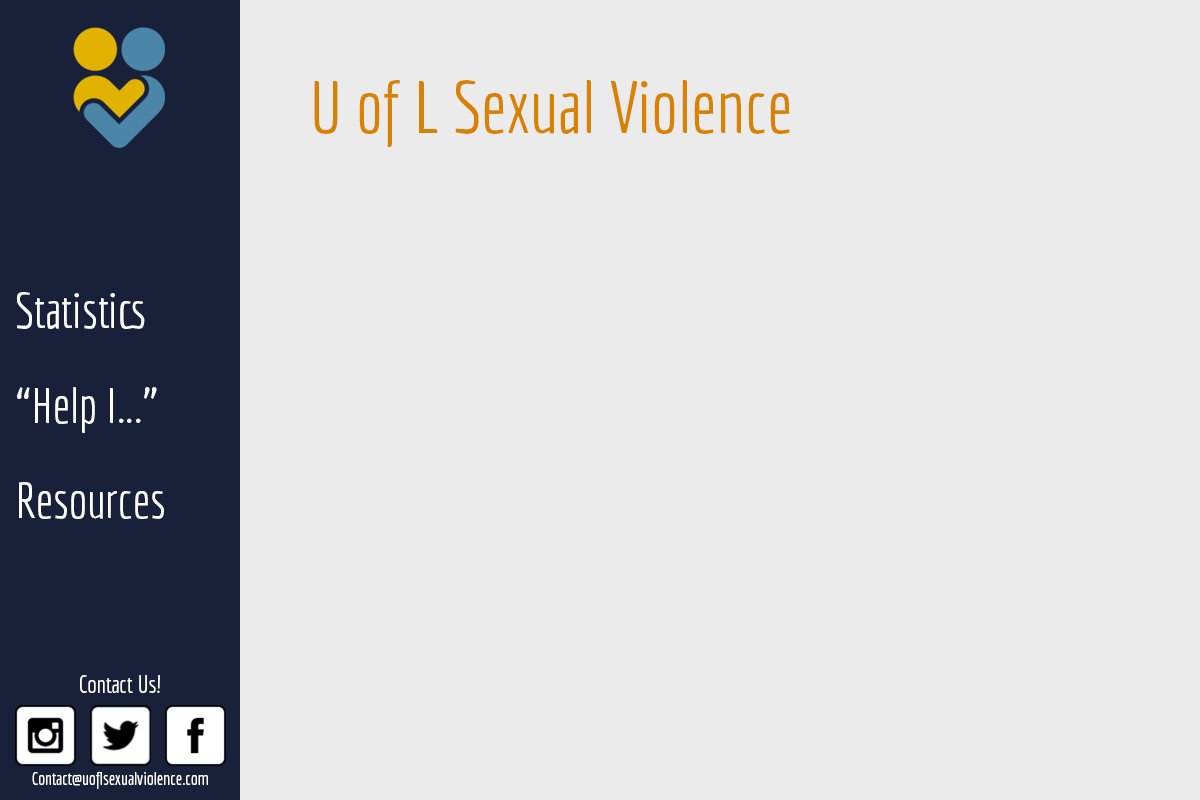
<style>
.page{position:relative;width:1200px;height:800px;background:#ebebeb}
.page>*{position:absolute;margin:0}
.t1{font:72px "Economica-Regular";color:#d98100}
.t2{font:48px/95px "Economica-Regular";color:#ffffff}
.t3{font:60px/95px "Economica-Regular";color:#ffffff}
.t4{font:24px "Economica-Regular";color:#ffffff}
.t5{font:18px "Economica-Regular";color:#ffffff}
</style>
<div class="page">
<p class="t1" style="left:314px;top:80px;width:476px;height:67px">U of L Sexual Violence</p>
<p class="t2" style="left:17px;top:292px;width:147px;height:227px;text-align:center"><span class="t3"><br></span>Statistics<br>“Help I...”<br>Resources</p>
<p class="t4" style="left:80px;top:675px;width:80px;height:18px">Contact Us!</p>
<p class="t5" style="left:32px;top:772px;width:176px;height:17px">Contact@uoflsexualviolence.com</p>
</div>
